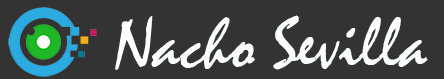
<style>
.page{position:relative;width:444px;height:79px;background:#333333}
.page>*{position:absolute;margin:0}
.t1{font:72.7px "Mistral";color:#fdfefe}
</style>
<div class="page">
<p class="t1" style="left:115px;top:15px;width:313px;height:55px">Nacho Sevilla</p>
</div>
